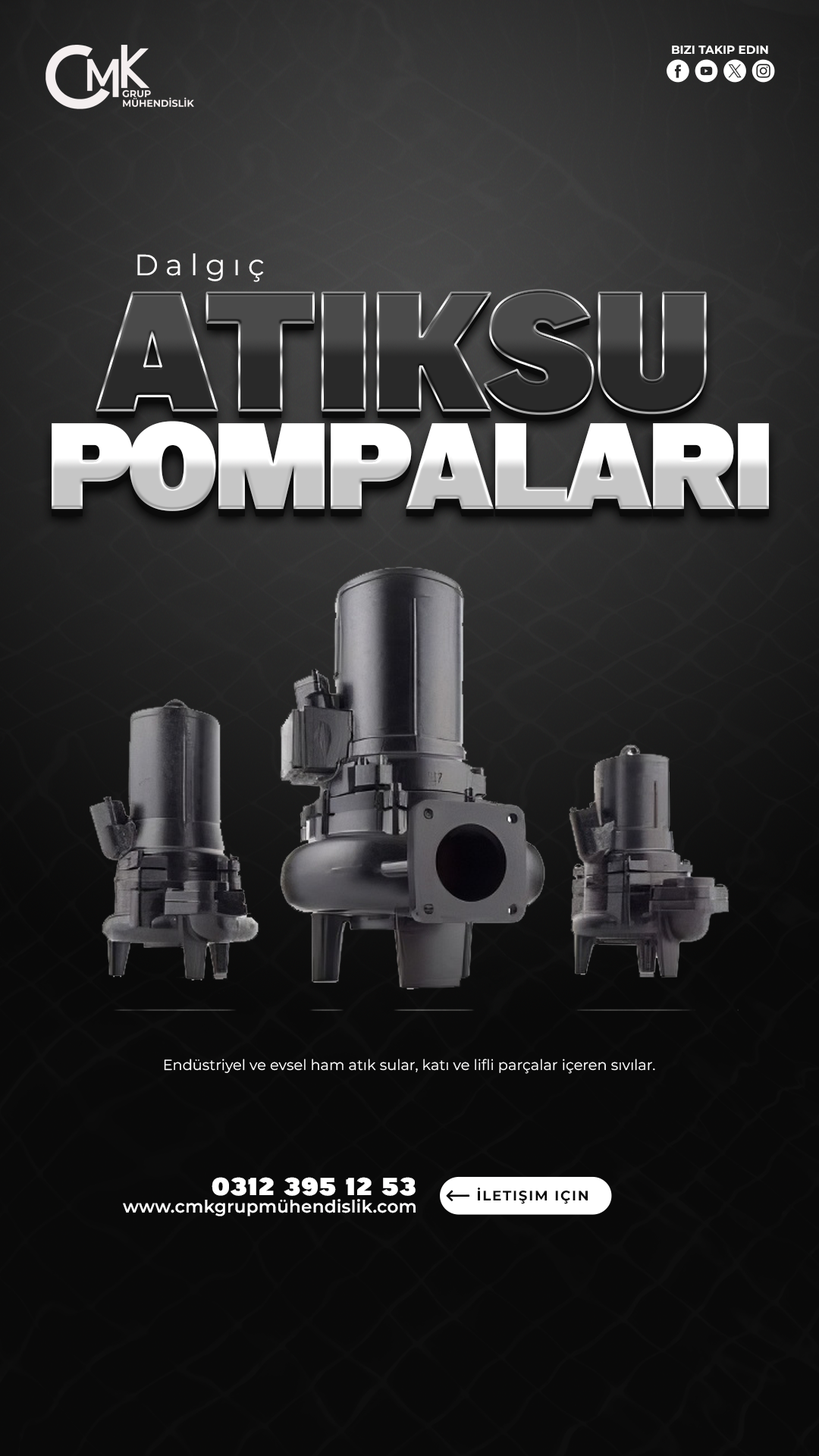
<style>
.page{position:relative;width:819px;height:1456px}
.page>*{position:absolute;margin:0}
.t1{font:11.6px "Montserrat-Bold";color:#ffffff;text-transform:uppercase}
.t2{font:29.4px "Montserrat-Regular";letter-spacing:0.25em;color:#ffffff}
.t3{font:113.7px "aBigDeal";letter-spacing:-0.05em}
.t4{font:14.7px "Montserrat-Regular";color:#ffffff}
.t5{font:23px "aBigDeal";letter-spacing:0.025em;color:#ffffff}
.t6{font:13.8px "Montserrat-Bold";letter-spacing:0.1em;color:#090909;text-transform:uppercase}
.t7{font:17.4px "Montserrat-SemiBold";letter-spacing:0.01em;color:#ffffff}
</style>
<div class="page">
<p class="t1" style="left:672px;top:45px;width:96px;height:9px">Bizi Takip edin</p>
<p class="t2" style="left:137px;top:253px;width:127px;height:29px">Dalgıç</p>
<p class="t3" style="left:52px;top:421px;width:717px;height:90px">PompalaRI</p>
<p class="t4" style="left:164px;top:1059px;width:491px;height:15px">Endüstriyel ve evsel ham atık sular, katı ve lifli parçalar içeren sıvılar.</p>
<p class="t5" style="left:212px;top:1177px;width:204px;height:19px">0312 395 12 53</p>
<p class="t6" style="left:478px;top:1188px;width:110px;height:16px">İletişim için</p>
<p class="t7" style="left:123px;top:1199px;width:293px;height:17px">www.cmkgrupmühendislik.com</p>
</div>
